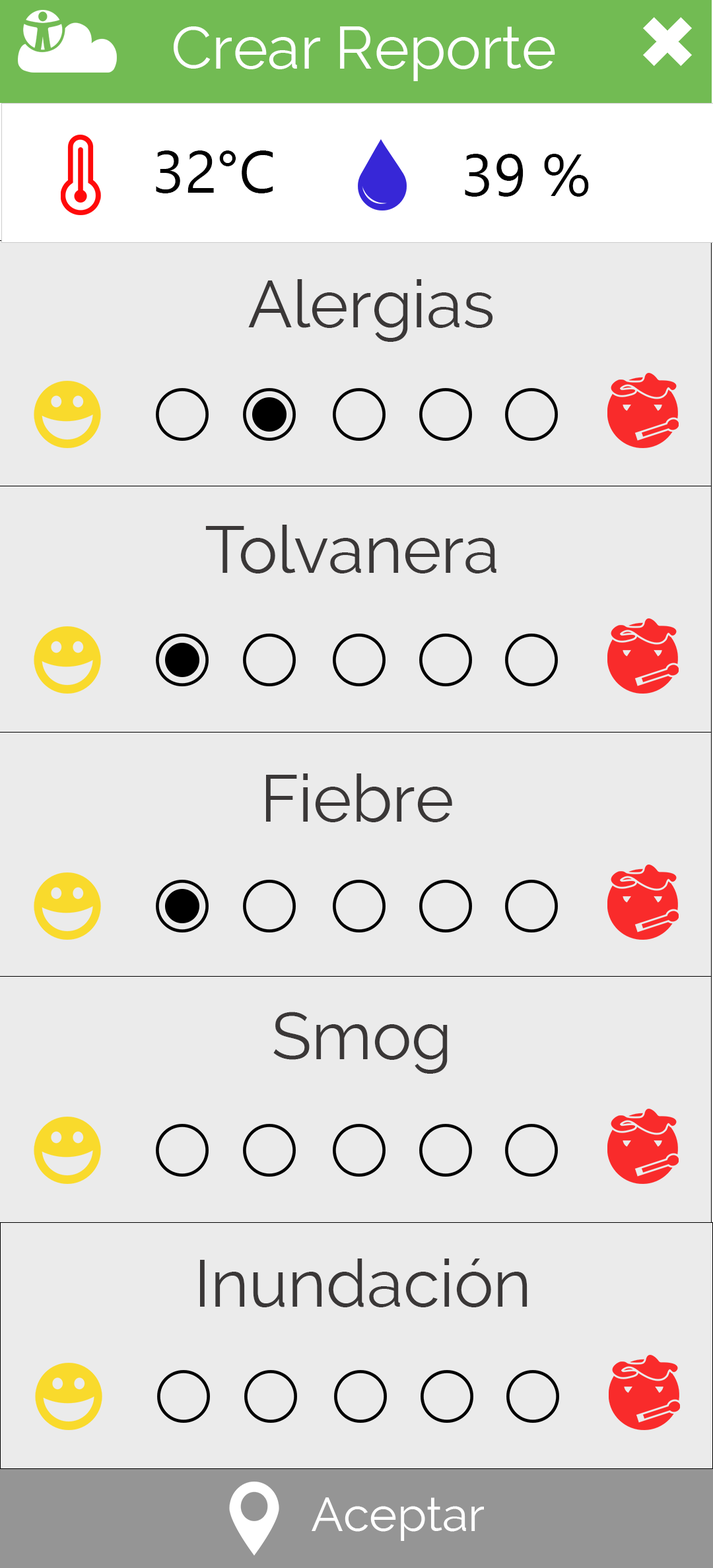
<style>
.page{position:relative;width:713px;height:1568px;background:#ebebeb}
.page>*{position:absolute;margin:0}
.t1{font:59.4px "Raleway";color:#ffffff}
.t2{font:59.4px "NirmalaUI";color:#000000}
.t3{font:66px "Raleway";color:#3a3737}
.t4{font:47.5px "Raleway";color:#ffffff}
</style>
<div class="page">
<p class="t1" style="left:174px;top:26px;width:381px;height:55px">Crear Reporte</p>
<p class="t2" style="left:156px;top:150px;width:117px;height:43px">32°C</p>
<p class="t2" style="left:465px;top:154px;width:124px;height:43px">39 %</p>
<p class="t3" style="left:248px;top:279px;width:245px;height:63px">Alergias</p>
<p class="t3" style="left:205px;top:525px;width:291px;height:48px">Tolvanera</p>
<p class="t3" style="left:266px;top:773px;width:186px;height:49px">Fiebre</p>
<p class="t3" style="left:273px;top:1012px;width:174px;height:62px">Smog</p>
<p class="t3" style="left:200px;top:1258px;width:327px;height:49px">Inundación</p>
<p class="t4" style="left:311px;top:1497px;width:173px;height:44px">Aceptar</p>
</div>
